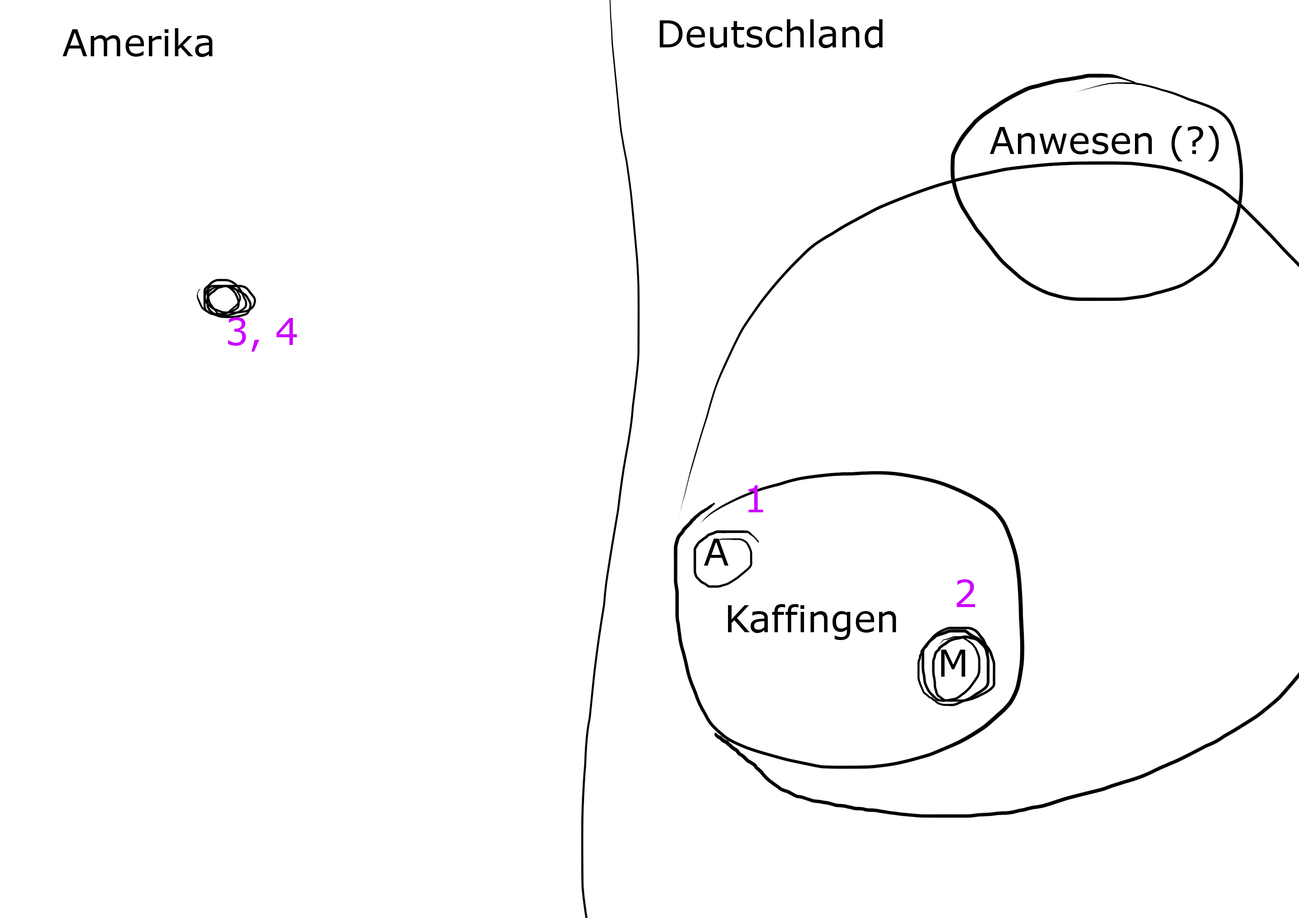
<style>
.page{position:relative;width:1299px;height:918px;background:#ffffff}
.page>*{position:absolute;margin:0}
.t1{font:37px "Verdana";color:#000000}
.t2{font:37px "Verdana";color:#010101}
.t3{font:37px "Verdana";color:#cc00ff}
</style>
<div class="page">
<p class="t1" style="left:63px;top:28px;width:150px;height:29px">Amerika</p>
<p class="t1" style="left:659px;top:19px;width:224px;height:29px">Deutschland</p>
<p class="t2" style="left:990px;top:126px;width:229px;height:35px">Anwesen (?)</p>
<p class="t3" style="left:228px;top:317px;width:69px;height:35px">3, 4</p>
<p class="t3" style="left:748px;top:485px;width:15px;height:27px">1</p>
<p class="t1" style="left:704px;top:539px;width:25px;height:27px">A</p>
<p class="t3" style="left:956px;top:579px;width:19px;height:28px">2</p>
<p class="t1" style="left:728px;top:604px;width:168px;height:36px">Kaffingen</p>
<p class="t1" style="left:941px;top:650px;width:24px;height:27px">M</p>
</div>
